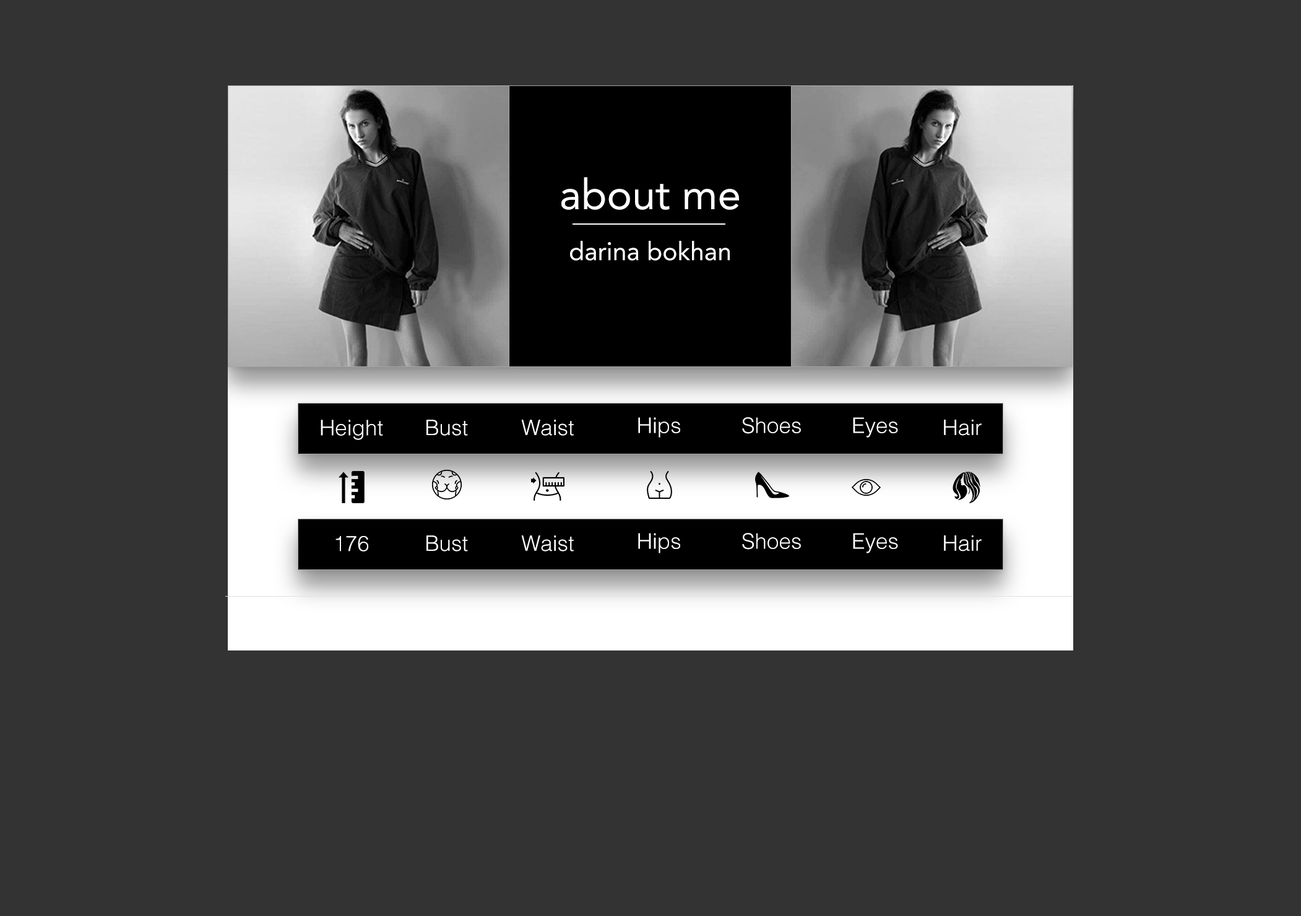
<style>
.page{position:relative;width:1301px;height:916px;background:#333333}
.page>*{position:absolute;margin:0}
.t1{font:42.1px "Avenir-Roman";color:#ffffff}
.t2{font:25.4px "Avenir-Roman";color:#ffffff}
.t3{font:21.1px "Helvetica-Light";color:#ffffff}
</style>
<div class="page">
<p class="t1" style="left:562px;top:177px;width:177px;height:33px">about me</p>
<p class="t2" style="left:570px;top:241px;width:160px;height:20px">darina bokhan</p>
<p class="t3" style="left:321px;top:420px;width:62px;height:20px">Height</p>
<p class="t3" style="left:427px;top:420px;width:41px;height:16px">Bust</p>
<p class="t3" style="left:521px;top:420px;width:53px;height:16px">Waist</p>
<p class="t3" style="left:638px;top:417px;width:42px;height:21px">Hips</p>
<p class="t3" style="left:742px;top:417px;width:59px;height:17px">Shoes</p>
<p class="t3" style="left:853px;top:417px;width:45px;height:21px">Eyes</p>
<p class="t3" style="left:944px;top:420px;width:38px;height:16px">Hair</p>
<p class="t3" style="left:638px;top:533px;width:42px;height:20px">Hips</p>
<p class="t3" style="left:742px;top:533px;width:59px;height:17px">Shoes</p>
<p class="t3" style="left:853px;top:533px;width:45px;height:20px">Eyes</p>
<p class="t3" style="left:336px;top:536px;width:32px;height:16px">176</p>
<p class="t3" style="left:427px;top:536px;width:41px;height:16px">Bust</p>
<p class="t3" style="left:521px;top:536px;width:53px;height:16px">Waist</p>
<p class="t3" style="left:944px;top:536px;width:38px;height:16px">Hair</p>
</div>
